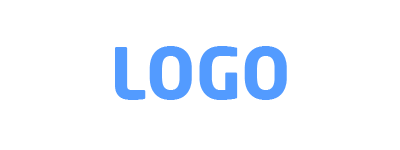
<style>
.page{position:relative;width:400px;height:150px;background:#ffffff}
.page>*{position:absolute;margin:0}
.t1{font:69.6px "NeoSans-Bold";color:#539bff;text-transform:uppercase}
</style>
<div class="page">
<p class="t1" style="left:115px;top:46px;width:172px;height:54px">logo</p>
</div>
